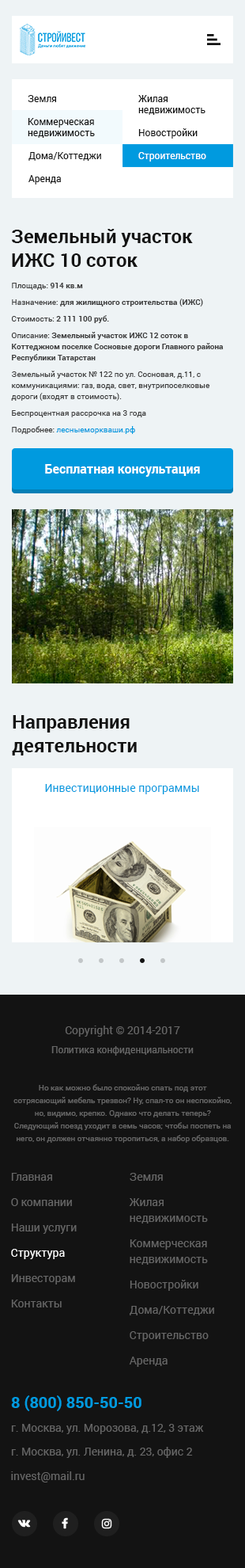
<style>
.page{position:relative;width:245px;height:1568px;background:#131313}
.page>*{position:absolute;margin:0}
.t1{font:9.5px "Roboto-Regular";color:#131313}
.t2{font:9.5px/11.1px "Roboto-Regular";color:#131313}
.t3{font:9.5px "Roboto-Regular";color:#ffffff}
.t4{font:19px/23.8px "Roboto-Bold";color:#131313}
.t5{font:7.9px/11.1px "Roboto-Regular";color:#3d3d3d}
.t6{font:7.9px/11.1px "Roboto-Bold";color:#3d3d3d}
.t7{font:7.9px/16.6px "Roboto-Regular";color:#3d3d3d}
.t8{font:7.9px/16.6px "Roboto-Bold";color:#3d3d3d}
.t9{font:7.9px/16.6px "Roboto-Regular";color:#009adf}
.t10{font:7.9px/11.1px "Roboto-Regular";color:#009adf}
.t11{font:12.7px "Roboto-Bold";color:#ffffff}
.t12{font:11.1px "Roboto-Regular";color:#009adf}
.t13{font:11.1px "Roboto-Regular";color:#666666}
.t14{font:9.5px "Roboto-Regular";color:#666666}
.t15{font:7.9px/12.7px "Roboto-Regular";color:#666666}
.t16{font:11.1px/25.3px "Roboto-Regular";color:#666666}
.t17{font:11.1px/25.3px "Roboto-Regular";color:#ffffff}
.t18{font:11.1px/15.8px "Roboto-Regular";color:#666666}
.t19{font:15.8px "Roboto-Bold";color:#009adf;text-transform:uppercase}
</style>
<div class="page">
<p class="t1" style="left:28px;top:95px;width:28px;height:7px">Земля</p>
<p class="t2" style="left:139px;top:95px;width:67px;height:20px">Жилая<br>недвижимость</p>
<p class="t2" style="left:28px;top:118px;width:67px;height:20px">Коммерческая<br>недвижимость</p>
<p class="t1" style="left:139px;top:128px;width:59px;height:11px">Новостройки</p>
<p class="t1" style="left:29px;top:152px;width:72px;height:9px">Дома/Коттеджи</p>
<p class="t3" style="left:139px;top:152px;width:68px;height:10px">Строительство</p>
<p class="t1" style="left:29px;top:175px;width:32px;height:10px">Аренда</p>
<p class="t4" style="left:12px;top:229px;width:181px;height:38px">Земельный участок<br>ИЖС 10 соток</p>
<p class="t5" style="left:11px;top:283px;width:213px;height:151px">Площадь: <span class="t6">914 кв.м<br></span><span class="t7">Назначение</span>: <span class="t6">для жилищного строительства (ИЖС)<br></span><span class="t7">Стоимость: </span><span class="t6">2 111 100 руб.<br></span><span class="t7">Описание: </span><span class="t8">З</span><span class="t6">емельный участок ИЖС 12 соток в Коттеджном поселке Сосновые дороги Главного района Республики Татарстан<br></span><span class="t7">Земельный </span>участок № 122 по ул. Сосновая, д.11, с коммуникациями: газ, вода, свет, внутрипоселковые дороги (входят в стоимость).<br><span class="t7">Беспроцентная р</span>ассрочка на 3 года<br><span class="t7">Подробнее: </span><span class="t9">лесн</span><span class="t10">ыеморкваши.рф</span></p>
<p class="t11" style="left:45px;top:464px;width:155px;height:13px">Бесплатная консультация</p>
<p class="t4" style="left:12px;top:715px;width:125px;height:40px">Направления<br>деятельности</p>
<p class="t12" style="left:45px;top:784px;width:155px;height:10px">Инвестиционные программы</p>
<p class="t13" style="left:65px;top:1026px;width:116px;height:11px">Copyright © 2014-2017</p>
<p class="t14" style="left:51px;top:1046px;width:143px;height:10px">Политика конфиденциальности</p>
<p class="t15" style="left:13px;top:1084px;width:219px;height:59px;text-align:center">Но как можно было спокойно спать под этот сотрясающий мебель трезвон? Ну, спал-то он неспокойно, но, видимо, крепко. Однако что делать теперь? Следующий поезд уходит в семь часов; чтобы поспеть на него, он должен отчаянно торопиться, а набор образцов.</p>
<p class="t16" style="left:11px;top:1173px;width:66px;height:134px">Главная<br>О компании<br>Наши услуги<br><span class="t17">Структура<br></span>Инвесторам<br>Контакты</p>
<p class="t16" style="left:129px;top:1173px;width:86px;height:194px">Земля<br>Жилая<br><span class="t18">недвижимость<br></span>Коммерческая<br><span class="t18">недвижимость<br></span>Новостройки<br>Дома/Коттеджи<br>Строительство<br>Аренда</p>
<p class="t19" style="left:11px;top:1395px;width:131px;height:16px">8 (800) 850-50-50</p>
<p class="t13" style="left:11px;top:1424px;width:193px;height:10px">г. Москва, ул. Морозова, д.12, 3 этаж</p>
<p class="t13" style="left:11px;top:1447px;width:182px;height:11px">г. Москва, ул. Ленина, д. 23, офис 2</p>
<p class="t13" style="left:11px;top:1471px;width:74px;height:11px">invest@mail.ru</p>
</div>
